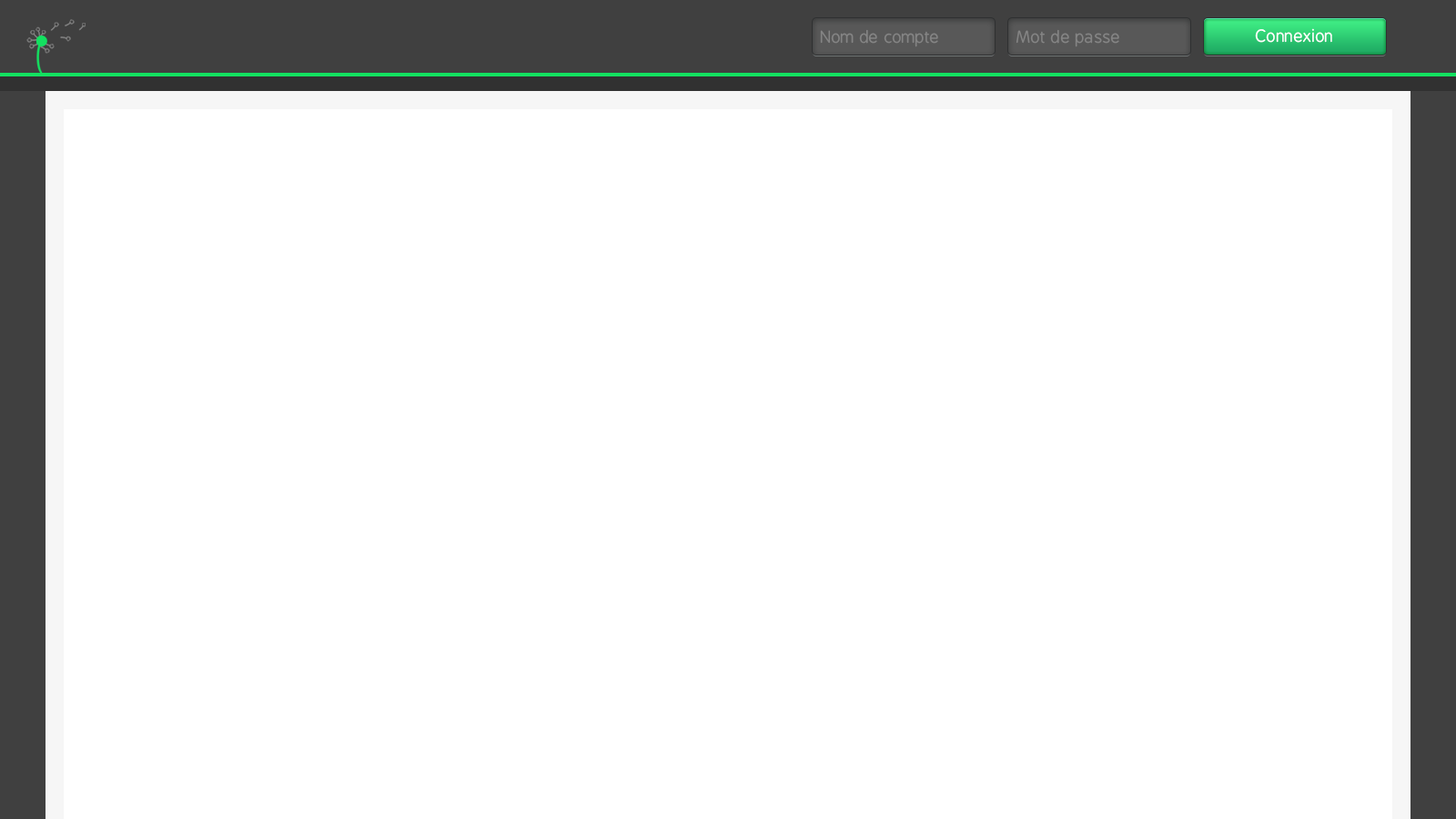
<style>
.page{position:relative;width:1456px;height:819px;background:#ffffff}
.page>*{position:absolute;margin:0}
.t1{font:16.4px "BPreplay";color:#848484}
.t2{font:16.4px "BPreplay";color:#ffffff}
</style>
<div class="page">
<p class="t1" style="left:820px;top:29px;width:118px;height:18px">Nom de compte</p>
<p class="t1" style="left:1016px;top:29px;width:103px;height:18px">Mot de passe</p>
<p class="t2" style="left:1255px;top:28px;width:77px;height:15px">Connexion</p>
</div>
